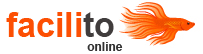
<style>
.page{position:relative;width:203px;height:54px;background:#ffffff}
.page>*{position:absolute;margin:0}
.t1{font:33.9px "Arial-BoldMT";color:#fc4f03}
.t2{font:33.9px "Arial-BoldMT";color:#403c3c}
.t3{font:12px "Arial-BoldMT";color:#323232}
</style>
<div class="page">
<p class="t1" style="left:6px;top:12px;width:108px;height:25px">facili<span class="t2">to</span></p>
<p class="t3" style="left:87px;top:42px;width:36px;height:9px">online</p>
</div>
